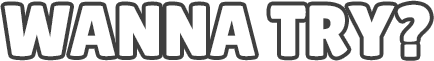
<style>
.page{position:relative;width:434px;height:61px;background:#ffffff}
.page>*{position:absolute;margin:0}
.t1{font:72px "LilitaOne";color:#ffffff}
</style>
<div class="page">
<p class="t1" style="left:4px;top:4px;width:426px;height:53px">WANNA TRY?</p>
</div>
